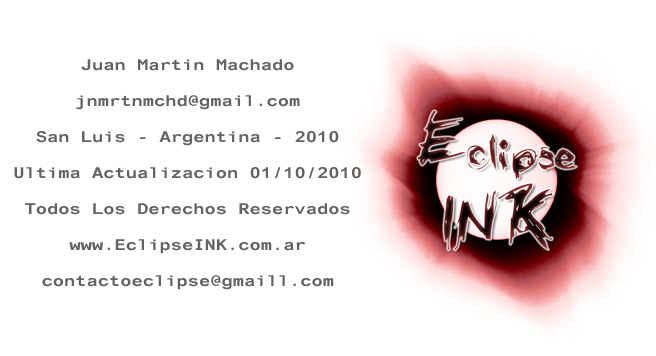
<style>
.page{position:relative;width:656px;height:356px;background:#ffffff}
.page>*{position:absolute;margin:0}
.t1{font:15px "ArialAlternative";color:#636363}
</style>
<div class="page">
<p class="t1" style="left:14px;top:59px;width:347px;height:231px;text-align:center">Juan Martin Machado <br><br>jnmrtnmchd@gmail.com <br><br>San Luis - Argentina - 2010 <br><br>Ultima Actualizacion 01/10/2010 <br><br>Todos Los Derechos Reservados <br><br>www.EclipseINK.com.ar <br><br>contactoeclipse@gmaill.com</p>
</div>
